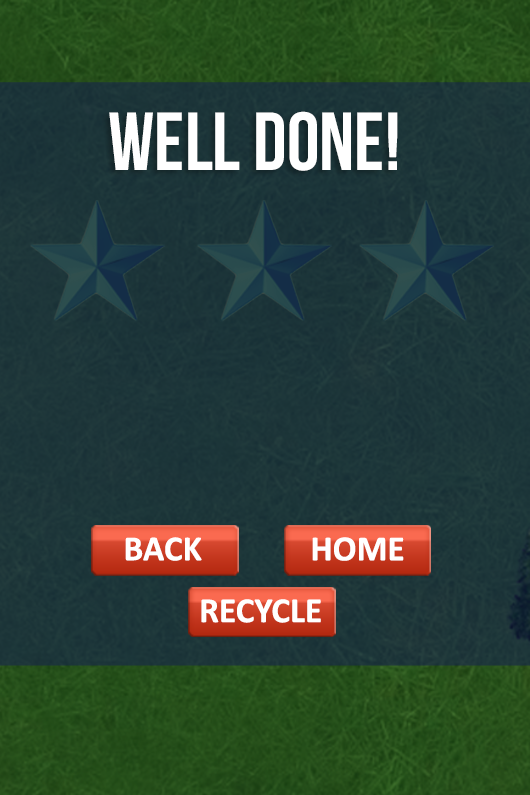
<style>
.page{position:relative;width:530px;height:795px}
.page>*{position:absolute;margin:0}
.t1{font:82.3px "BebasNeue";color:#ffffff}
.t2{font:35.5px "Calibri-Bold";color:#ffffff}
</style>
<div class="page">
<p class="t1" style="left:109px;top:111px;width:289px;height:60px">Well Done!</p>
<p class="t2" style="left:125px;top:537px;width:77px;height:24px">BACK</p>
<p class="t2" style="left:312px;top:537px;width:92px;height:24px">HOME</p>
<p class="t2" style="left:201px;top:599px;width:120px;height:24px">RECYCLE</p>
</div>
